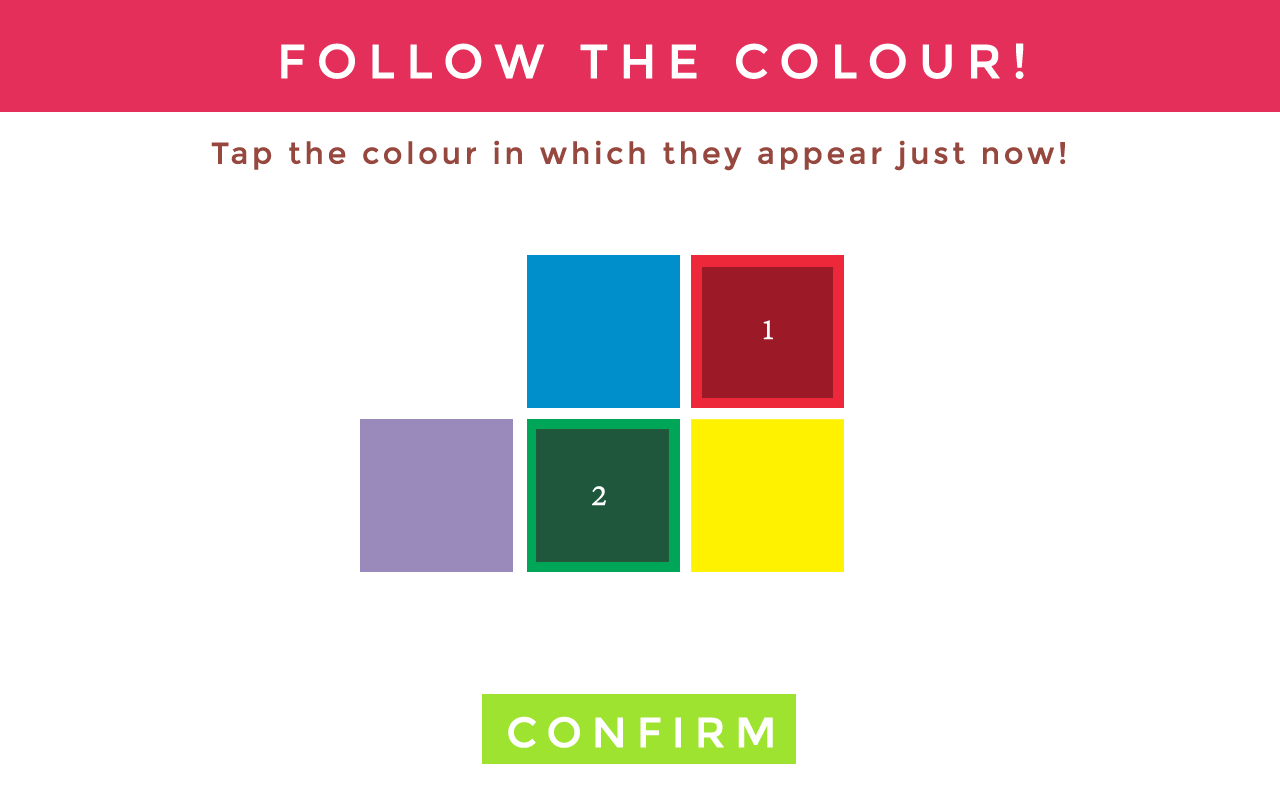
<style>
.page{position:relative;width:1280px;height:800px;background:#ffffff}
.page>*{position:absolute;margin:0}
.t1{font:48px "Montserrat-Regular";letter-spacing:0.2em;color:#ffffff;text-transform:uppercase;font-weight:bold}
.t2{font:30px "Montserrat-Regular";letter-spacing:0.1em;color:#96483f;font-weight:bold}
.t3{font:36px "AdobeDevanagari-Regular";letter-spacing:0.2em;color:#ffffff;text-transform:uppercase;font-weight:bold}
.t4{font:42.3px "Montserrat-Regular";letter-spacing:0.2em;color:#ffffff;text-transform:uppercase;font-weight:bold}
</style>
<div class="page">
<p class="t1" style="left:281px;top:43px;width:743px;height:36px">Follow the Colour!</p>
<p class="t2" style="left:211px;top:140px;width:855px;height:31px">Tap the colour in which they appear just now!</p>
<p class="t3" style="left:763px;top:320px;width:10px;height:20px">1</p>
<p class="t3" style="left:592px;top:486px;width:14px;height:20px">2</p>
<p class="t4" style="left:508px;top:716px;width:265px;height:32px">Confirm</p>
</div>
